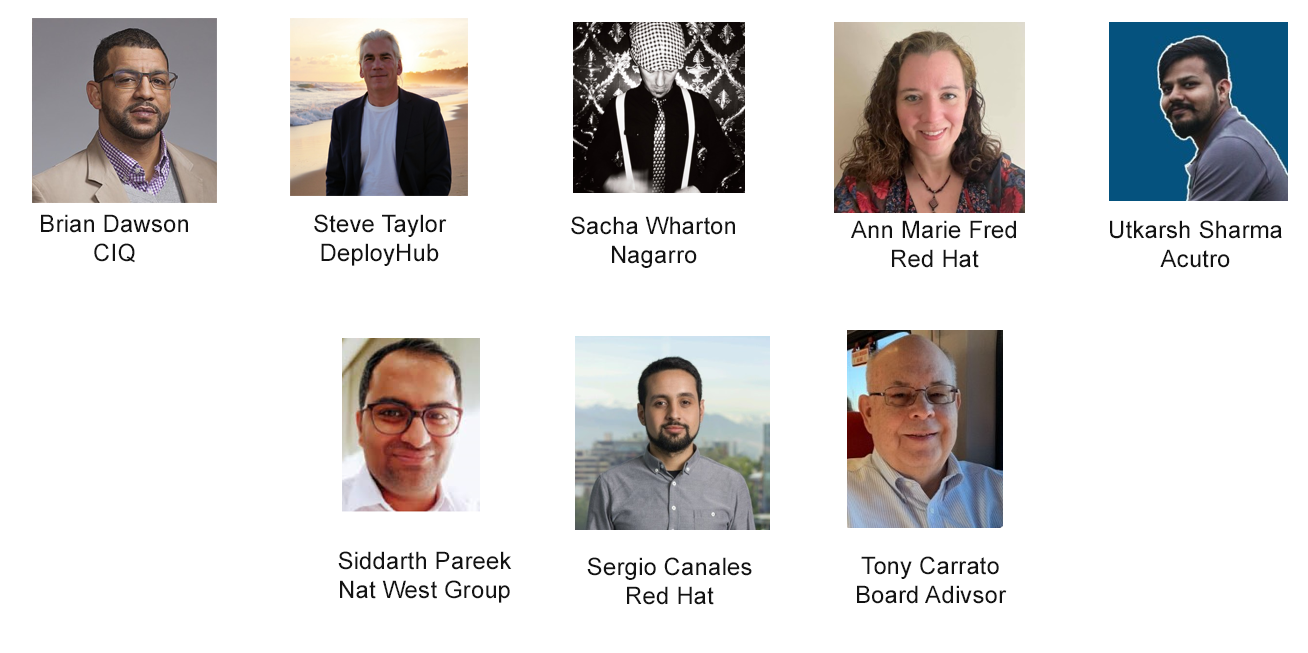
<style>
.page{position:relative;width:1308px;height:653px;background:#ffffff}
.page>*{position:absolute;margin:0}
.t1{font:24px "ArialMT";letter-spacing:0.005em;color:#131313}
</style>
<div class="page">
<p class="t1" style="left:41px;top:214px;width:147px;height:49px;text-align:center">Brian Dawson<br>CIQ</p>
<p class="t1" style="left:314px;top:214px;width:133px;height:52px;text-align:center">Steve Taylor<br>DeployHub</p>
<p class="t1" style="left:571px;top:216px;width:164px;height:52px;text-align:center">Sacha Wharton<br>Nagarro</p>
<p class="t1" style="left:851px;top:220px;width:165px;height:48px;text-align:center">Ann Marie Fred<br>Red Hat</p>
<p class="t1" style="left:1110px;top:220px;width:172px;height:48px;text-align:center">Utkarsh Sharma<br>Acutro</p>
<p class="t1" style="left:338px;top:551px;width:174px;height:52px;text-align:center">Siddarth Pareek<br>Nat West Group</p>
<p class="t1" style="left:587px;top:557px;width:165px;height:48px;text-align:center">Sergio Canales<br>Red Hat</p>
<p class="t1" style="left:857px;top:556px;width:150px;height:48px;text-align:center">Tony Carrato<br>Board Adivsor</p>
</div>
